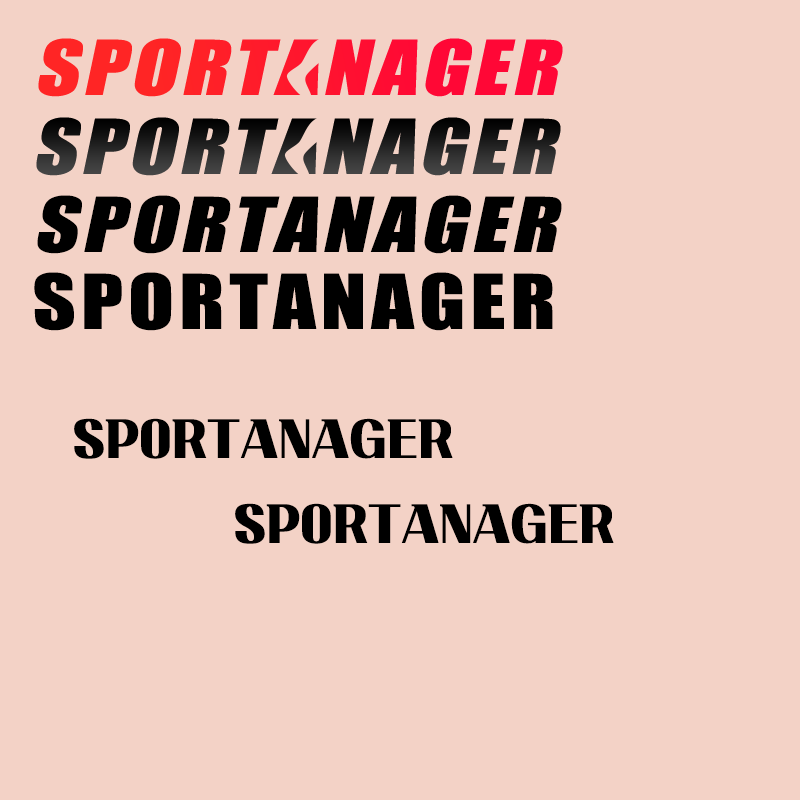
<style>
.page{position:relative;width:800px;height:800px;background:#f3d2c6}
.page>*{position:absolute;margin:0}
.t1{font:70px "Impact";letter-spacing:0.06em;color:#000000;font-style:italic;scale:1.2 1}
.t2{font:70px "Impact";letter-spacing:0.06em;color:#000000;scale:1.2 1}
.t3{font:48px "KoreanBDCS-R";color:#000000}
</style>
<div class="page">
<p class="t1" style="left:37px;top:195px;width:525px;height:59px">SPORTANAGER</p>
<p class="t2" style="left:34px;top:272px;width:519px;height:59px">SPORTANAGER</p>
<p class="t3" style="left:74px;top:418px;width:379px;height:41px">SPORTANAGER</p>
<p class="t3" style="left:235px;top:503px;width:379px;height:41px">SPORTANAGER</p>
</div>
